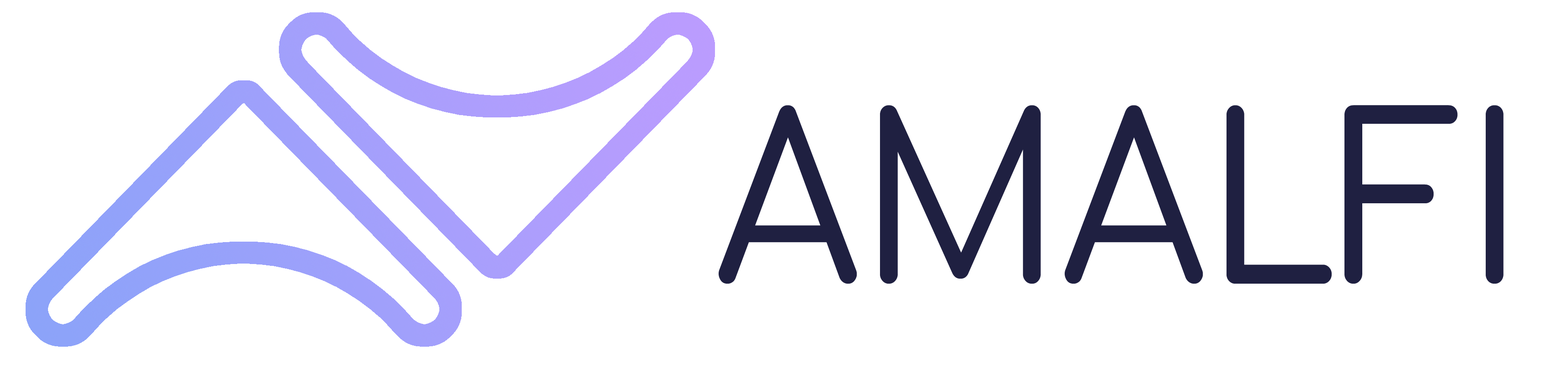
<style>
.page{position:relative;width:1568px;height:370px;background:#ffffff}
.page>*{position:absolute;margin:0}
.t1{font:228.6px "Comfortaa-Medium";color:#1f2041;scale:0.9 1}
</style>
<div class="page">
<p class="t1" style="left:719px;top:105px;width:785px;height:179px">AMALFI</p>
</div>
